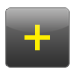
<style>
.page{position:relative;width:75px;height:75px;background:#ffffff}
.page>*{position:absolute;margin:0}
.t1{font:53.2px "ArialMT";letter-spacing:0.1em;color:#fff000}
</style>
<div class="page">
<p class="t1" style="left:24px;top:24px;width:26px;height:27px">+</p>
</div>
